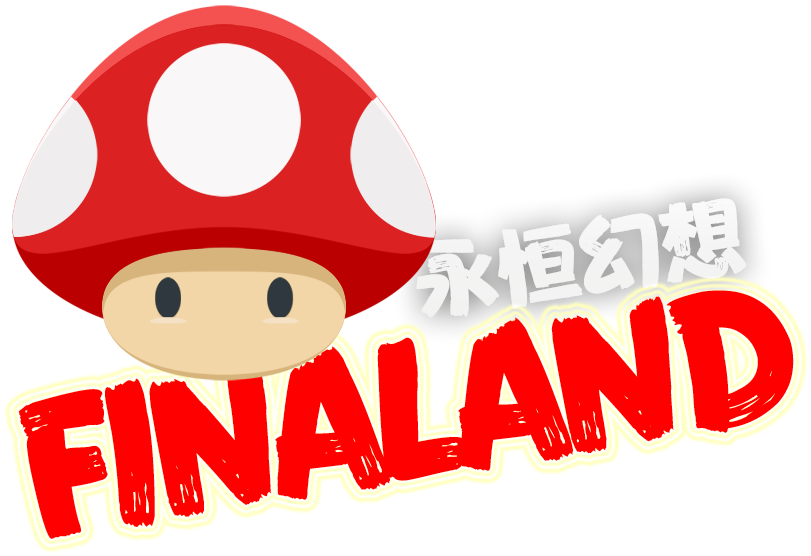
<style>
.page{position:relative;width:811px;height:556px;background:#ffffff}
.page>*{position:absolute;margin:0}
.t1{font:83px "FZFENSTXJW--GB1-0";color:#ffffff}
.t2{font:172.5px "FZFENSTXJW--GB1-0";letter-spacing:-0.08em;color:#ff0000}
</style>
<div class="page">
<p class="t1" style="left:416px;top:198px;width:331px;height:120px;rotate:-9deg">永恒幻想</p>
<p class="t2" style="left:18px;top:290px;width:776px;height:249px;rotate:-9deg">FINALAND</p>
</div>
